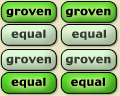
<style>
.page{position:relative;width:120px;height:96px}
.page>*{position:absolute;margin:0}
.t1{font:10.8px "Charcoal";color:#000000;scale:1.15 1}
.t2{font:10.8px "Charcoal";color:#353b32;scale:1.15 1}
.t3{font:10.8px "Charcoal";color:#333931;scale:1.15 1}
.t4{font:10.8px "Charcoal";color:#333a31;scale:1.15 1}
</style>
<div class="page">
<p class="t1" style="left:6px;top:8px;width:45px;height:10px">groven</p>
<p class="t1" style="left:66px;top:8px;width:45px;height:10px">groven</p>
<p class="t2" style="left:11px;top:29px;width:35px;height:11px">equal</p>
<p class="t2" style="left:72px;top:29px;width:34px;height:11px">equal</p>
<p class="t3" style="left:6px;top:56px;width:45px;height:10px">groven</p>
<p class="t4" style="left:66px;top:56px;width:45px;height:10px">groven</p>
<p class="t1" style="left:11px;top:77px;width:35px;height:11px">equal</p>
<p class="t1" style="left:71px;top:77px;width:34px;height:11px">equal</p>
</div>
